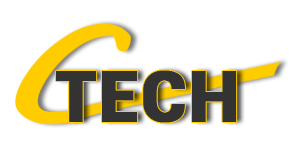
<style>
.page{position:relative;width:300px;height:150px;background:#ffffff}
.page>*{position:absolute;margin:0}
.t1{font:71.3px "Roboto-Black";letter-spacing:0.01em;color:#333333;font-weight:bold}
</style>
<div class="page">
<p class="t1" style="left:56px;top:70px;width:181px;height:53px">TECH</p>
</div>
